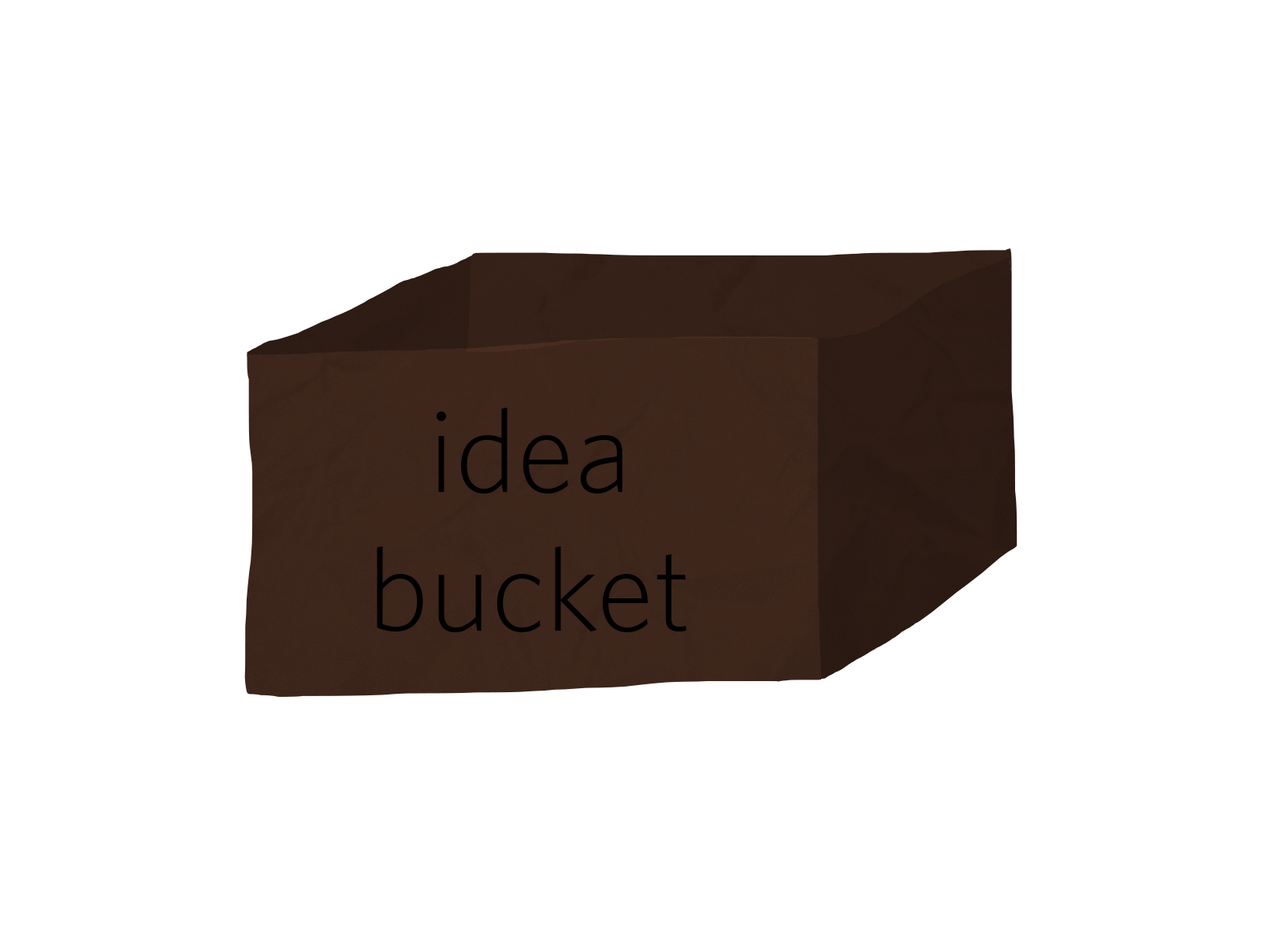
<style>
.page{position:relative;width:1261px;height:946px;background:#ffffff}
.page>*{position:absolute;margin:0}
.t1{font:118.2px/69.4px "Whitney-Light";color:#000000}
</style>
<div class="page">
<p class="t1" style="left:377px;top:407px;width:309px;height:225px;text-align:center">idea<br><br>bucket</p>
</div>
